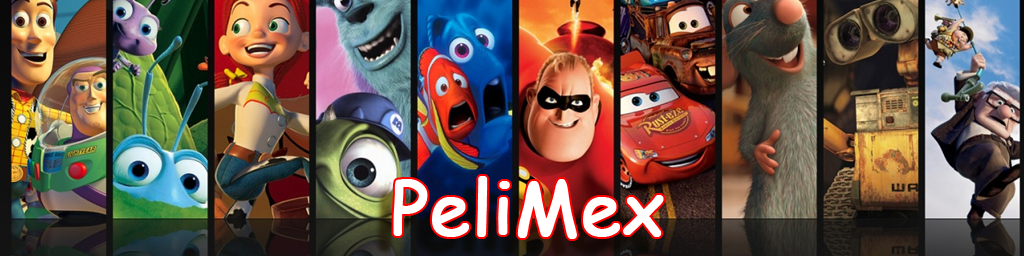
<style>
.page{position:relative;width:1024px;height:256px}
.page>*{position:absolute;margin:0}
.t1{font:72px "ComicSansMS";color:#ffffff;font-weight:bold}
</style>
<div class="page">
<p class="t1" style="left:393px;top:176px;width:271px;height:63px">PeliMex</p>
</div>
